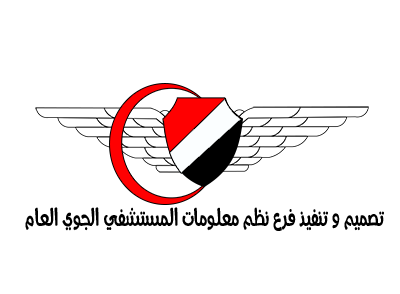
<style>
.page{position:relative;width:400px;height:294px;background:#ffffff}
.page>*{position:absolute;margin:0}
.t1{font:26.6px "AraAsmaaBeltajie-Regular";color:#000000;scale:0.71 1}
</style>
<div class="page">
<p class="t1" style="left:25px;top:207px;width:359px;height:24px">تصميم و تنفيذ فرع نظم معلومات المستشفي الجوي العام</p>
</div>
